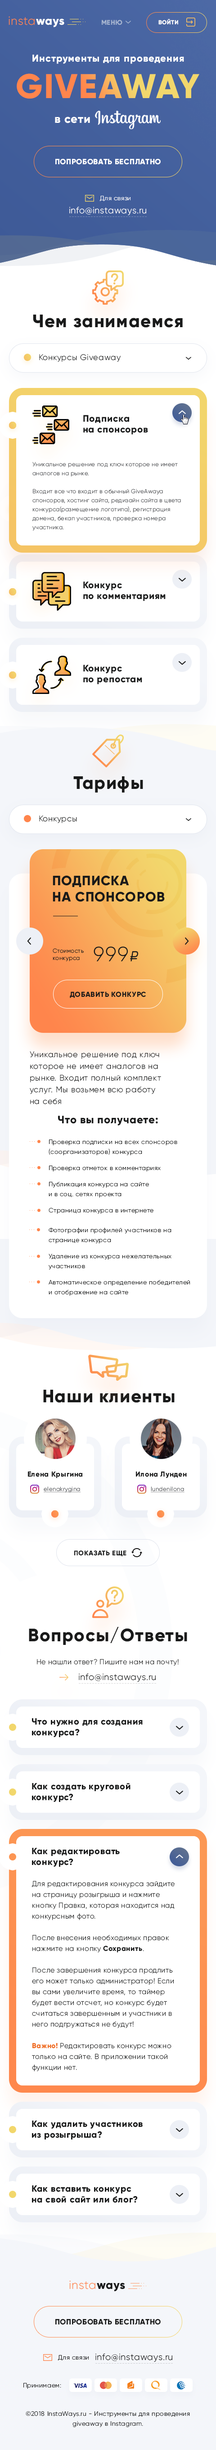
<style>
.page{position:relative;width:216px;height:2450px;background:#ffffff}
.page>*{position:absolute;margin:0}
.t1{font:11.7px "Gilroy-Light";letter-spacing:0.04em;color:#ff854c}
.t2{font:11.7px "Gilroy-ExtraBold";letter-spacing:0.04em;color:#ffffff}
.t3{font:6.8px "Gilroy-ExtraBold";letter-spacing:0.04em;color:#a6b5d0;text-transform:uppercase}
.t4{font:5.9px "Gilroy-ExtraBold";letter-spacing:0.04em;color:#ffffff;text-transform:uppercase}
.t5{font:9.9px "Gilroy-ExtraBold";letter-spacing:0.04em;color:#ffffff}
.t6{font:34.2px "Gilroy-ExtraBold";letter-spacing:0.04em;text-transform:uppercase}
.t7{font:7.7px "Gilroy-ExtraBold";letter-spacing:0.04em;color:#ffffff;text-transform:uppercase}
.t8{font:6.3px "Gilroy-Light";letter-spacing:0.04em;color:#ffffff}
.t9{font:9px "Gilroy-Light";letter-spacing:0.04em;color:#ffffff}
.t10{font:18px "Gilroy-ExtraBold";letter-spacing:0.04em;color:#191a1a}
.t11{font:8.1px "Gilroy-Light";letter-spacing:0.04em;color:#191a1a}
.t12{font:9.5px/10.8px "Gilroy-ExtraBold";letter-spacing:0.04em;color:#191a1a}
.t13{font:5.9px/9px "Gilroy-Light";letter-spacing:0.04em;color:#57595c}
.t14{font:13.5px "Gilroy-ExtraBold";letter-spacing:0.04em;color:#191a1a;text-transform:uppercase}
.t15{font:5.9px "Gilroy-Light";letter-spacing:0.04em;color:#191a1a}
.t16{font:20.7px "Gilroy-Light";letter-spacing:0.04em;color:#191a1a}
.t17{font:14.4px "ALSRubl";letter-spacing:0.04em;color:#191a1a}
.t18{font:7.2px "Gilroy-ExtraBold";letter-spacing:0.04em;color:#191a1a;text-transform:uppercase}
.t19{font:8.1px/11.7px "Gilroy-Light";letter-spacing:0.04em;color:#191a1a}
.t20{font:10.8px "Gilroy-ExtraBold";letter-spacing:0.04em;color:#191a1a}
.t21{font:6.3px/9.9px "Gilroy-Light";letter-spacing:0.04em;color:#191a1a}
.t22{font:6.3px/16.2px "Gilroy-Light";letter-spacing:0.04em;color:#191a1a}
.t23{font:7.2px "Gilroy-ExtraBold";letter-spacing:0.04em;color:#191a1a}
.t24{font:5.9px "Gilroy-Light";letter-spacing:0.04em;color:#57595c;text-decoration:underline}
.t25{font:6.8px "Gilroy-ExtraBold";letter-spacing:0.04em;color:#191a1a;text-transform:uppercase}
.t26{font:7.2px "Gilroy-Light";letter-spacing:0.04em;color:#191a1a}
.t27{font:9px "Gilroy-Light";letter-spacing:0.04em;color:#191a1a}
.t28{font:9px/10.8px "Gilroy-ExtraBold";letter-spacing:0.04em;color:#191a1a}
.t29{font:7.2px/10.8px "Gilroy-Light";letter-spacing:0.04em;color:#191a1a}
.t30{font:7.2px/10.8px "Gilroy-ExtraBold";letter-spacing:0.04em;color:#191a1a}
.t31{font:11.7px "Gilroy-ExtraBold";letter-spacing:0.04em;color:#191a1a}
.t32{font:7.7px "Gilroy-ExtraBold";letter-spacing:0.04em;color:#191a1a;text-transform:uppercase}
.t33{font:6.3px "Gilroy-Light";letter-spacing:0.04em;color:#191a1a}
</style>
<div class="page">
<p class="t1" style="left:9px;top:16px;width:55px;height:11px">insta<span class="t2">ways</span></p>
<p class="t3" style="left:102px;top:20px;width:20px;height:5px">Меню</p>
<p class="t4" style="left:158px;top:19px;width:20px;height:6px">Войти</p>
<p class="t5" style="left:32px;top:54px;width:152px;height:10px">Инструменты для проведения</p>
<p class="t6" style="left:17px;top:73px;width:182px;height:26px">giveaway</p>
<p class="t2" style="left:55px;top:117px;width:35px;height:6px">в сети</p>
<p class="t7" style="left:55px;top:158px;width:106px;height:7px">Попробовать бесплатно</p>
<p class="t8" style="left:100px;top:196px;width:30px;height:5px">Для связи</p>
<p class="t9" style="left:69px;top:207px;width:77px;height:9px">info@instaways.ru</p>
<p class="t10" style="left:33px;top:315px;width:150px;height:13px">Чем занимаемся</p>
<p class="t11" style="left:39px;top:354px;width:82px;height:8px">Конкурсы Giveaway</p>
<p class="t12" style="left:83px;top:415px;width:65px;height:20px">Подписка<br>на спонсоров</p>
<p class="t13" style="left:32px;top:462px;width:149px;height:69px">Уникальное решение под ключ которое не имеет аналогов на рынке. <br><br>Входит все что входит в обычный GiveAwayа спонсоров, хостинг сайта, редизайн сайта в цвета конкурса(размещение логотипа), регистрация домена, бекап участников, проверка номера участника.</p>
<p class="t12" style="left:83px;top:581px;width:83px;height:20px">Конкурс<br>по комментариям</p>
<p class="t12" style="left:83px;top:665px;width:59px;height:19px">Конкурс<br>по репостам</p>
<p class="t10" style="left:73px;top:776px;width:70px;height:16px">Тарифы</p>
<p class="t11" style="left:39px;top:815px;width:38px;height:8px">Конкурсы</p>
<p class="t14" style="left:53px;top:875px;width:112px;height:27px">Подписка<br>на спонсоров</p>
<p class="t15" style="left:53px;top:948px;width:31px;height:13px">Стоимость<br>конкурса</p>
<p class="t16" style="left:94px;top:946px;width:44px;height:15px">999<span class="t17">b</span></p>
<p class="t18" style="left:70px;top:991px;width:76px;height:7px">Добавить конкурс</p>
<p class="t19" style="left:30px;top:1051px;width:131px;height:53px">Уникальное решение под ключ которое не имеет аналогов на рынке. Входит полный комплект услуг. Мы возьмем всю работу<br>на себя</p>
<p class="t20" style="left:58px;top:1116px;width:100px;height:9px">Что вы получаете:</p>
<p class="t21" style="left:49px;top:1139px;width:141px;height:157px">Проверка подписки на всех спонсоров<br>(соорганизаторов) конкурса<br><span class="t22">Проверка отметок </span>в комментариях<br><span class="t22">Публикация конкурса на сайте<br></span>и в соц. сетях проекта<br><span class="t22">Страница конкурса</span> в интернете<br><br>Фотографии профилей участников на<br>странице конкурса<br><span class="t22">Удаление из конкурса </span>нежелательных<br>участников<br><span class="t22">Автоматическое определение </span>победителей<br>и отображение на сайте</p>
<p class="t10" style="left:43px;top:1390px;width:132px;height:13px">Наши клиенты</p>
<p class="t23" style="left:28px;top:1471px;width:54px;height:7px">Елена Крыгина</p>
<p class="t23" style="left:136px;top:1471px;width:51px;height:7px">Илона Лунден</p>
<p class="t24" style="left:44px;top:1486px;width:37px;height:6px">elenakrygina</p>
<p class="t24" style="left:151px;top:1486px;width:33px;height:6px">lundenilona</p>
<p class="t25" style="left:74px;top:1550px;width:52px;height:6px">Показать еще</p>
<p class="t10" style="left:29px;top:1627px;width:158px;height:18px">Вопросы/Ответы</p>
<p class="t26" style="left:37px;top:1659px;width:142px;height:7px">Не нашли ответ? Пишите нам на почту!</p>
<p class="t27" style="left:79px;top:1673px;width:77px;height:9px">info@instaways.ru</p>
<p class="t28" style="left:32px;top:1718px;width:111px;height:19px">Что нужно для создания<br>конкурса?</p>
<p class="t28" style="left:32px;top:1783px;width:98px;height:19px">Как создать круговой<br>конкурс?</p>
<p class="t28" style="left:32px;top:1848px;width:88px;height:19px">Как редактировать<br>конкурс?</p>
<p class="t29" style="left:32px;top:1881px;width:143px;height:190px">Для редактирования конкурса зайдите на страницу розыгрыша и нажмите кнопку Правка, которая находится над конкурсным фото.<br><br>После внесения необходимых правок нажмите на кнопку <span class="t30">Сохранить</span>.<br><br>После завершения конкурса продлить его может только администратор! Если вы сами увеличите время, то таймер будет вести отсчет, но конкурс будет считаться завершенным и участники в него подгружаться не будут!<br><br><span class="t30">Важно!</span> Редактировать конкурс можно только на сайте. В приложении такой функции нет.</p>
<p class="t28" style="left:32px;top:2120px;width:111px;height:19px">Как удалить участников<br>из розыгрыша?</p>
<p class="t28" style="left:32px;top:2185px;width:106px;height:18px">Как вставить конкурс<br>на свой сайт или блог?</p>
<p class="t1" style="left:69px;top:2280px;width:56px;height:11px">insta<span class="t31">ways</span></p>
<p class="t32" style="left:55px;top:2318px;width:106px;height:7px">Попробовать бесплатно</p>
<p class="t33" style="left:58px;top:2355px;width:31px;height:5px">Для связи</p>
<p class="t27" style="left:95px;top:2353px;width:77px;height:9px">info@instaways.ru</p>
<p class="t33" style="left:23px;top:2383px;width:38px;height:6px">Принимаем:</p>
<p class="t21" style="left:26px;top:2411px;width:164px;height:16px;text-align:center">©2018 InstaWays.ru - Инструменты для проведения<br>giveaway в Instagram.</p>
</div>
